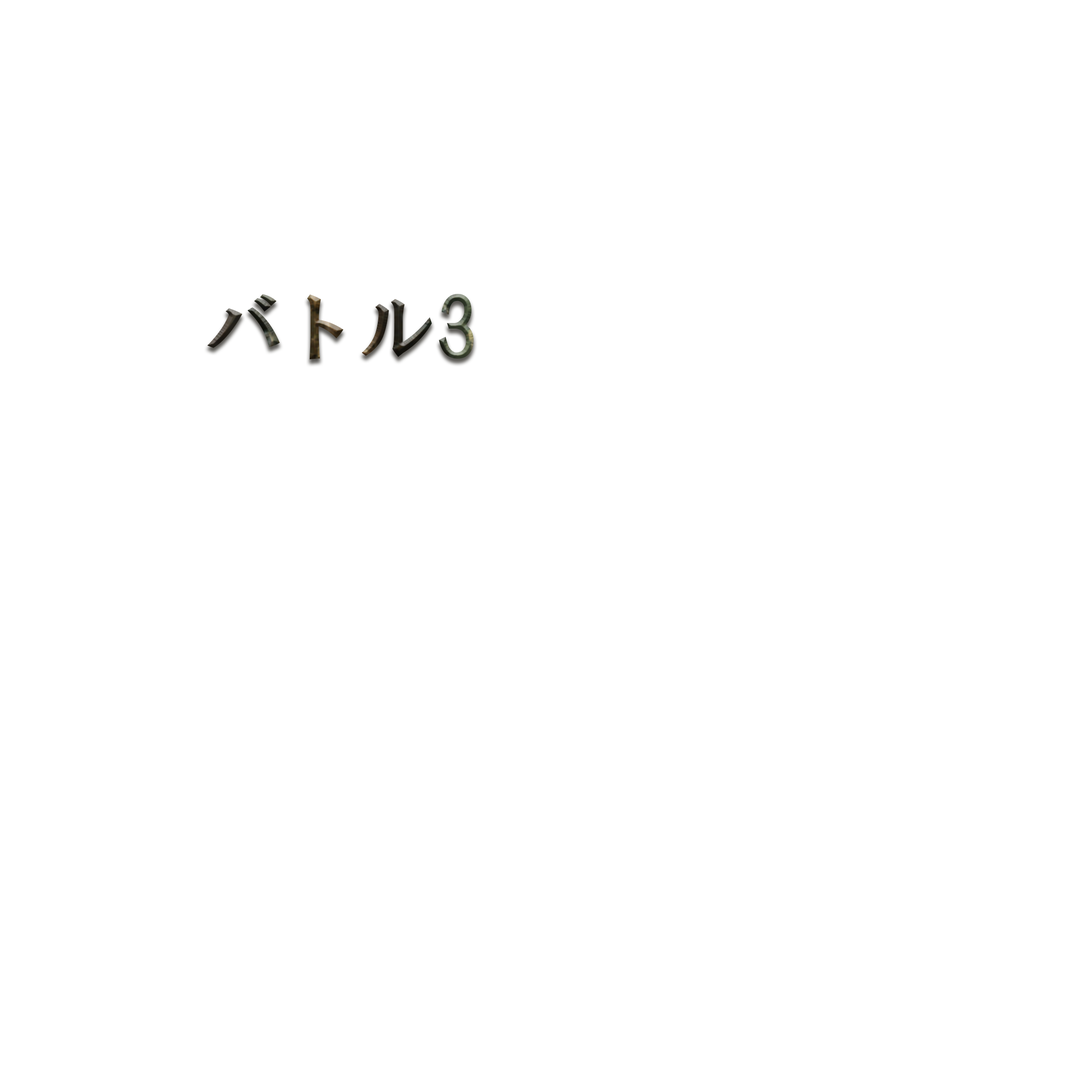
<style>
.page{position:relative;width:1092px;height:1092px;background:#ffffff}
.page>*{position:absolute;margin:0}
.t1{font:76.8px "HGSSoeiPresenceEB"}
</style>
<div class="page">
<p class="t1" style="left:207px;top:294px;width:267px;height:65px">バトル3</p>
</div>
